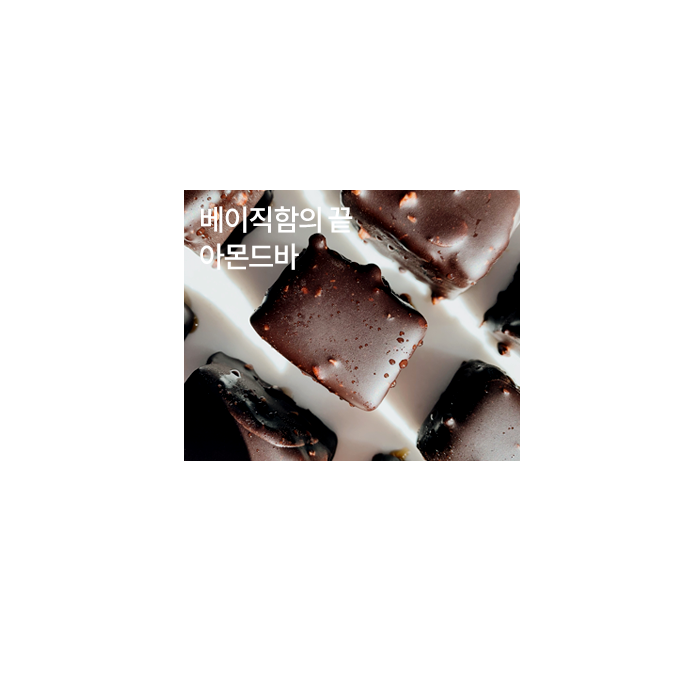
<style>
.page{position:relative;width:700px;height:700px;background:#ffffff}
.page>*{position:absolute;margin:0}
.t1{font:29px/37px "NotoSansKR-Medium";letter-spacing:-0.065em;color:#ffffff;text-transform:uppercase}
</style>
<div class="page">
<p class="t1" style="left:200px;top:206px;width:153px;height:64px">베이직함의 끝<br>아몬드바</p>
</div>
